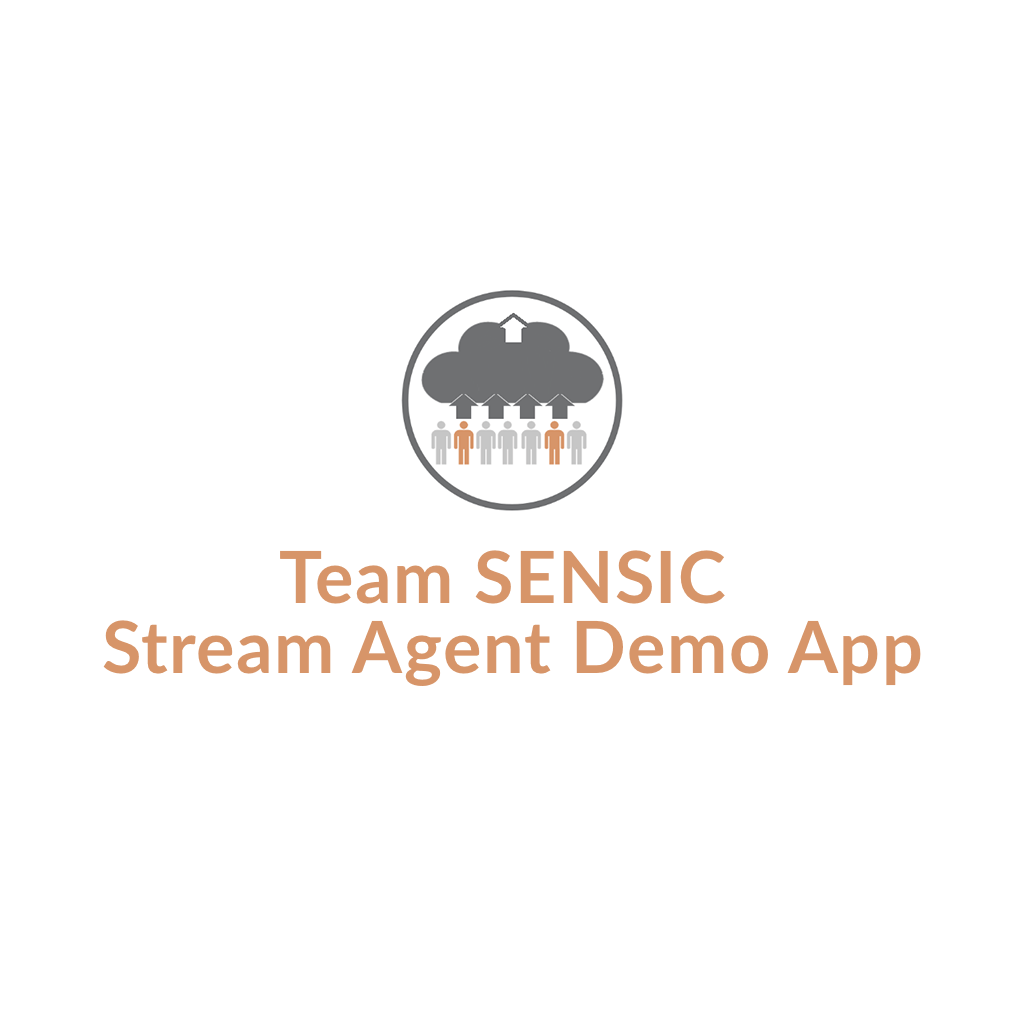
<style>
.page{position:relative;width:1024px;height:1024px;background:#ffffff}
.page>*{position:absolute;margin:0}
.t1{font:72px/35px "Lato-Bold";letter-spacing:0.02em;color:#d79569}
</style>
<div class="page">
<p class="t1" style="left:103px;top:550px;width:818px;height:136px;text-align:center">Team SENSIC <br><br>Stream Agent Demo App</p>
</div>
